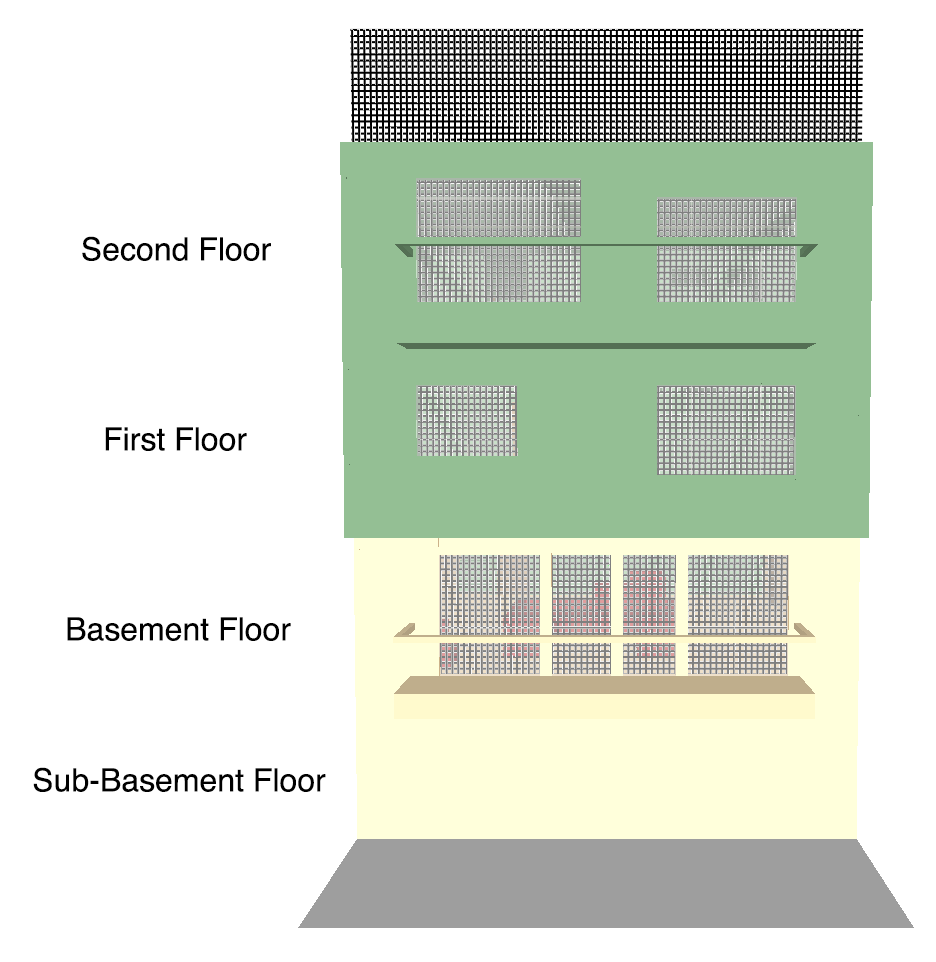
<style>
.page{position:relative;width:936px;height:962px;background:#ffffff}
.page>*{position:absolute;margin:0}
.t1{font:32px "Helvetica";color:#000000}
</style>
<div class="page">
<p class="t1" style="left:82px;top:236px;width:189px;height:25px">Second Floor</p>
<p class="t1" style="left:105px;top:427px;width:142px;height:24px">First Floor</p>
<p class="t1" style="left:67px;top:617px;width:224px;height:24px">Basement Floor</p>
<p class="t1" style="left:33px;top:767px;width:293px;height:25px">Sub-Basement Floor</p>
</div>
